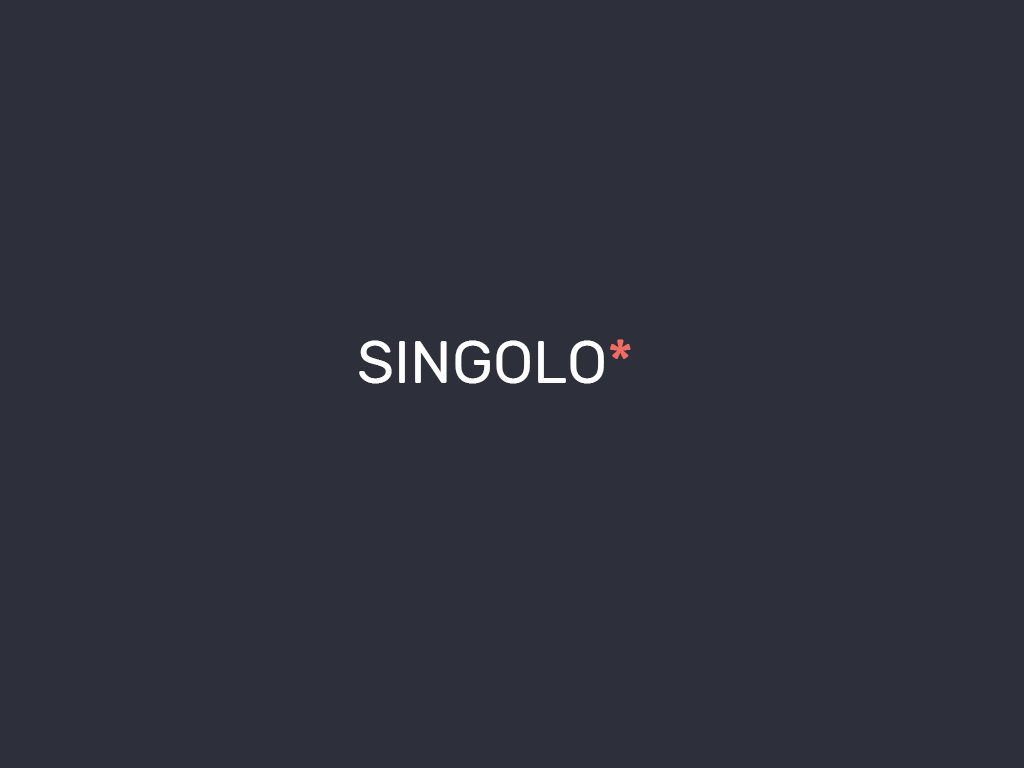
<style>
.page{position:relative;width:1024px;height:768px;background:#2d303a}
.page>*{position:absolute;margin:0}
.t1{font:60px "Rubik-Regular";color:#fefefe}
.t2{font:60px "Rubik-Regular";color:#f06c64}
</style>
<div class="page">
<p class="t1" style="left:359px;top:339px;width:272px;height:45px">SINGOLO<span class="t2">*</span></p>
</div>
